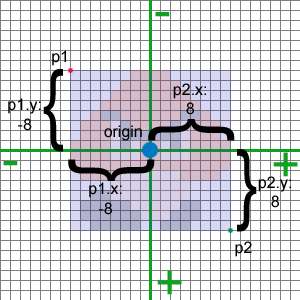
<style>
.page{position:relative;width:300px;height:300px;background:#ffffff}
.page>*{position:absolute;margin:0}
.t1{font:50px "ArialMT";color:#0fa120}
.t2{font:16px "ArialMT";color:#000000}
.t3{font:88.1px "ArialMT";color:#000000;scale:0.75 1}
.t4{font:91.7px "ArialMT";color:#000000;scale:0.81 1}
</style>
<div class="page">
<p class="t1" style="left:155px;top:12px;width:15px;height:5px">-</p>
<p class="t2" style="left:52px;top:50px;width:14px;height:16px">p1</p>
<p class="t3" style="left:43px;top:69px;width:20px;height:83px">{</p>
<p class="t2" style="left:173px;top:83px;width:33px;height:32px;text-align:center">p2.x:<br>8</p>
<p class="t2" style="left:8px;top:98px;width:33px;height:33px;text-align:center">p1.y:<br>-8</p>
<p class="t2" style="left:104px;top:125px;width:38px;height:16px">origin</p>
<p class="t4" style="left:148px;top:119px;width:87px;height:22px;rotate:90deg">{</p>
<p class="t3" style="left:237px;top:149px;width:20px;height:83px;rotate:180deg">{</p>
<p class="t1" style="left:3px;top:161px;width:15px;height:5px">-</p>
<p class="t4" style="left:68px;top:159px;width:87px;height:22px;rotate:-90deg">{</p>
<p class="t1" style="left:273px;top:152px;width:25px;height:25px">+</p>
<p class="t2" style="left:89px;top:182px;width:33px;height:33px;text-align:center">p1.x:<br>-8</p>
<p class="t2" style="left:258px;top:176px;width:33px;height:32px;text-align:center">p2.y:<br>8</p>
<p class="t2" style="left:235px;top:241px;width:17px;height:16px">p2</p>
<p class="t1" style="left:157px;top:270px;width:25px;height:25px">+</p>
</div>
